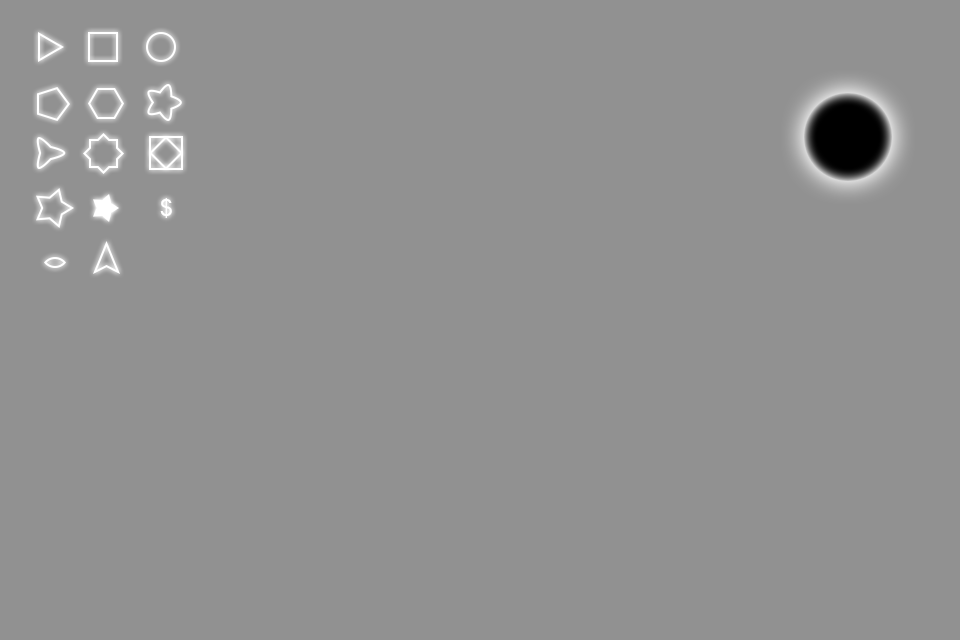
<style>
.page{position:relative;width:960px;height:640px;background:#919191}
.page>*{position:absolute;margin:0}
.t1{font:22.8px "ArialMT";color:#ffffff}
</style>
<div class="page">
<p class="t1" style="left:160px;top:198px;width:12px;height:20px">$</p>
</div>
